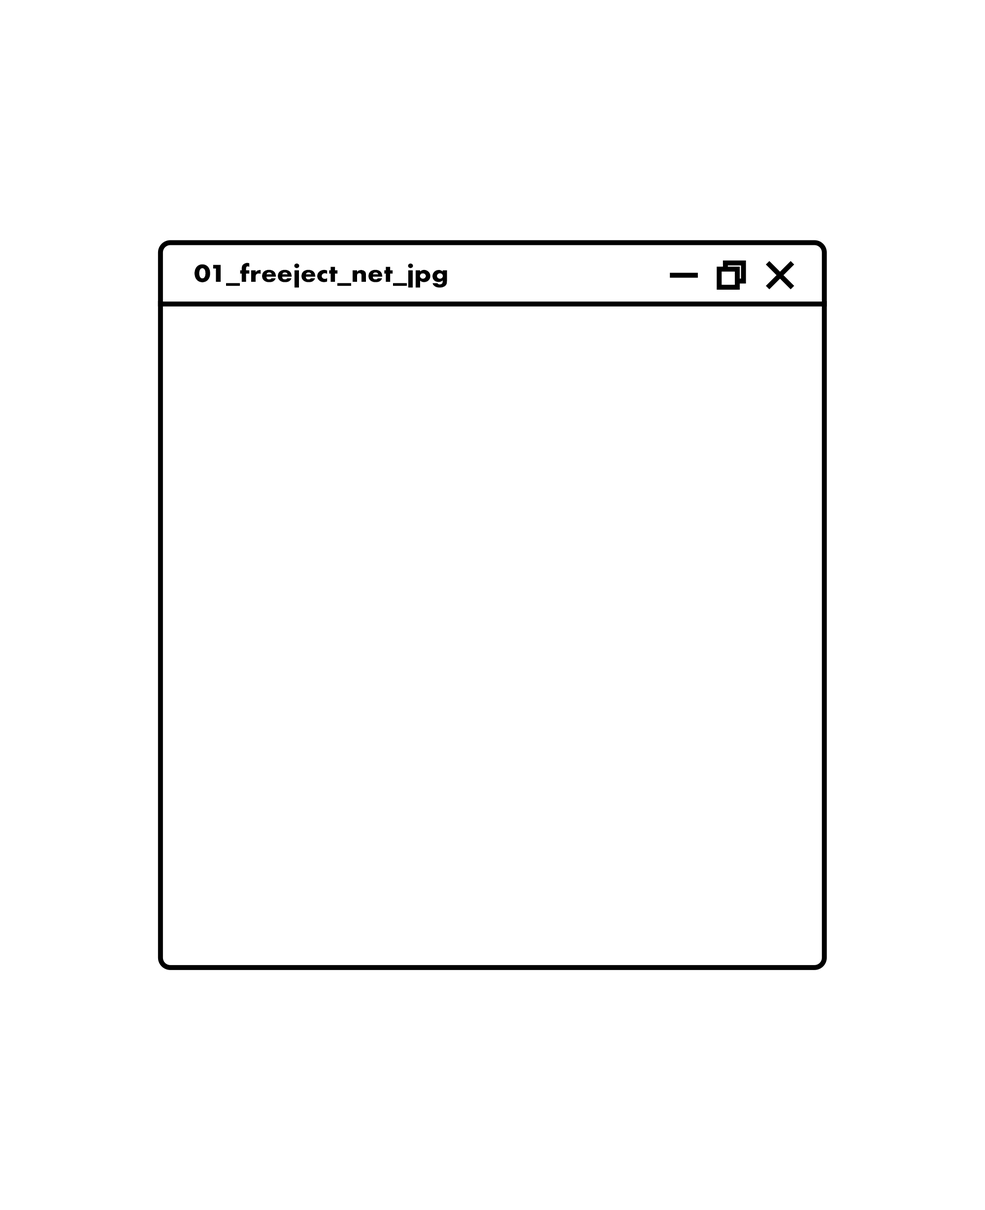
<style>
.page{position:relative;width:985px;height:1210px;background:#ffffff}
.page>*{position:absolute;margin:0}
.t1{font:22.6px "Futura-Bold";color:#000000;scale:1.09 1}
</style>
<div class="page">
<p class="t1" style="left:195px;top:263px;width:252px;height:25px">01_freeject_net_jpg</p>
</div>
